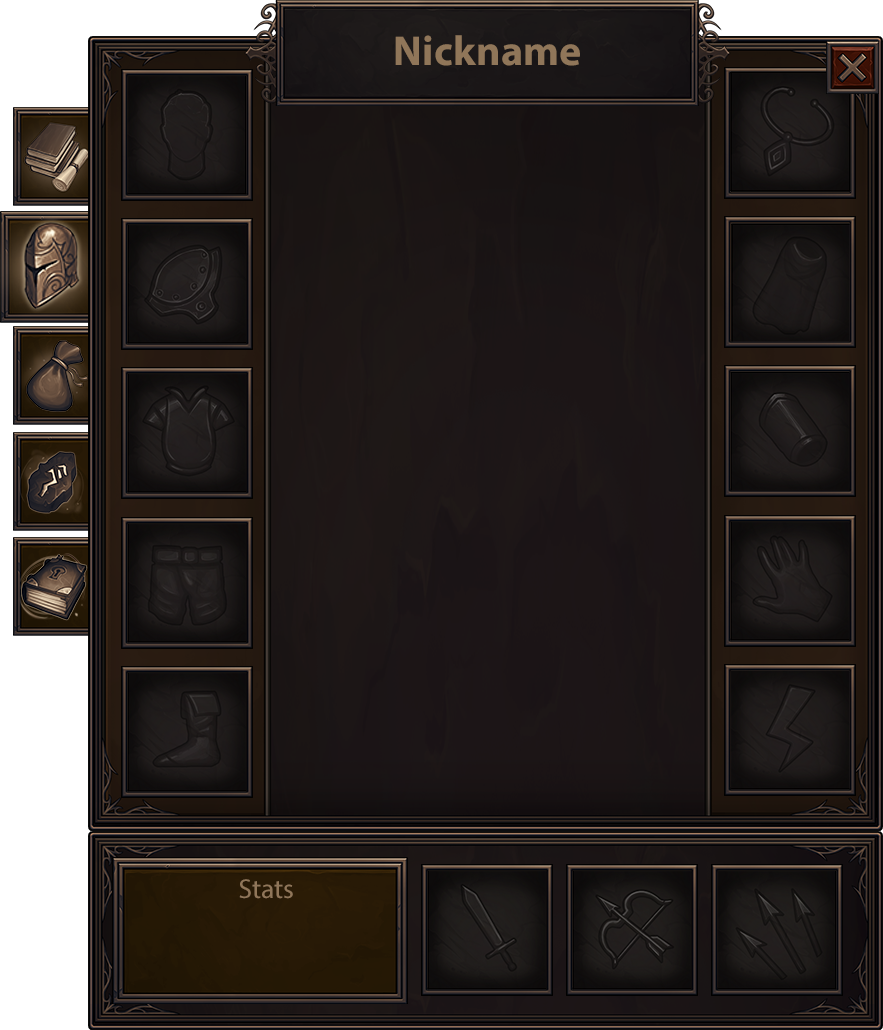
<style>
.page{position:relative;width:883px;height:1030px}
.page>*{position:absolute;margin:0}
.t1{font:41.9px "MyriadPro-Bold";color:#907659}
.t2{font:27.4px "MyriadPro-Regular";color:#907659}
</style>
<div class="page">
<p class="t1" style="left:395px;top:35px;width:185px;height:31px">Nickname</p>
<p class="t2" style="left:239px;top:879px;width:54px;height:20px">Stats</p>
</div>
